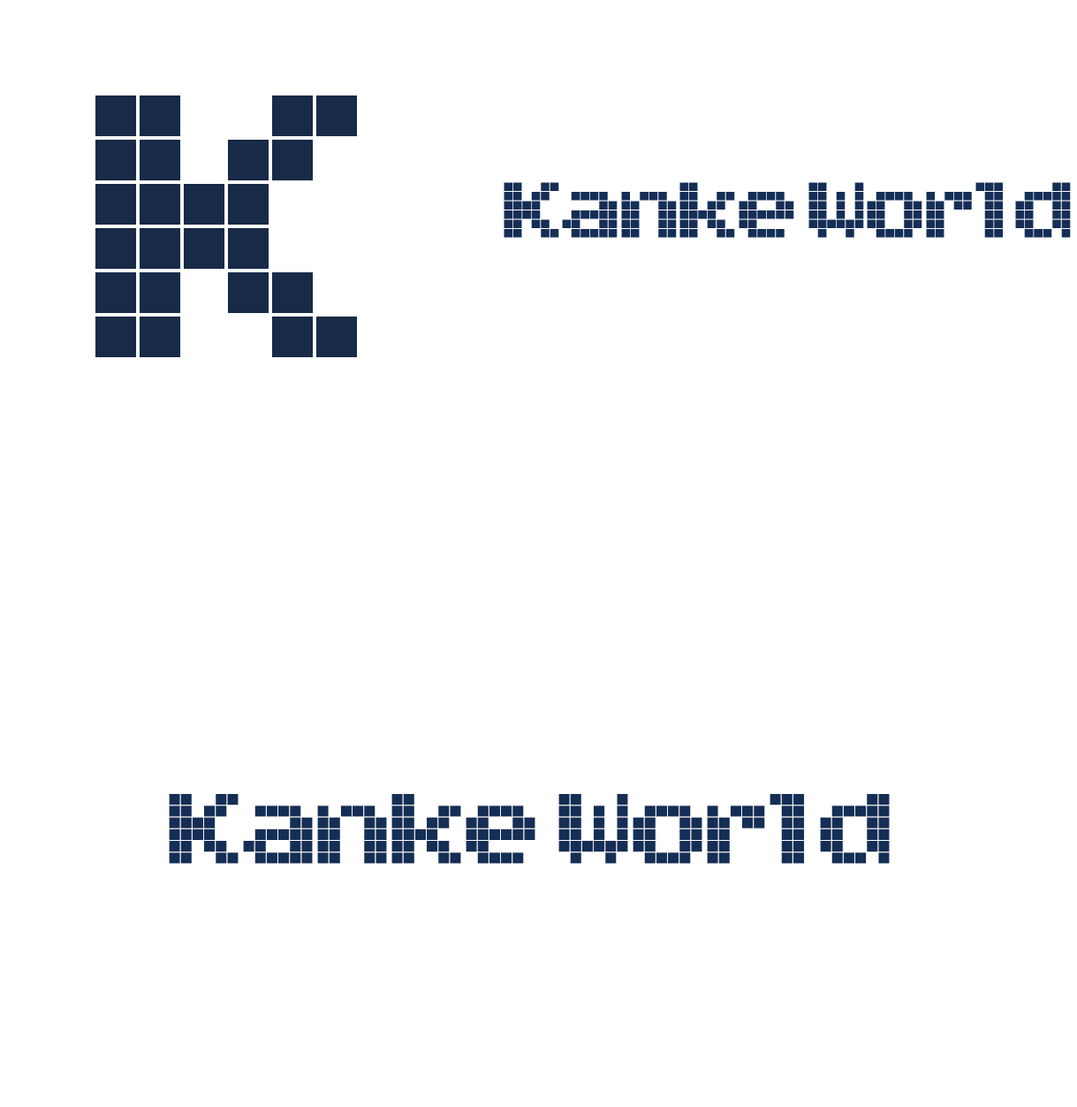
<style>
.page{position:relative;width:1077px;height:1107px;background:#ffffff}
.page>*{position:absolute;margin:0}
.t1{font:353.6px "NuAnkoMochi-Square-1";color:#172a47}
.t2{font:74.2px "NuAnkoMochi-Square-1";letter-spacing:-0.08em;color:#142e56}
.t3{font:93.7px "NuAnkoMochi-Square-1";letter-spacing:-0.08em;color:#142e56}
</style>
<div class="page">
<p class="t1" style="left:95px;top:95px;width:262px;height:262px">K</p>
<p class="t2" style="left:504px;top:182px;width:291px;height:56px">Kanke</p>
<p class="t2" style="left:809px;top:182px;width:262px;height:56px">World</p>
<p class="t3" style="left:169px;top:794px;width:367px;height:70px">Kanke</p>
<p class="t3" style="left:559px;top:794px;width:331px;height:70px">World</p>
</div>
